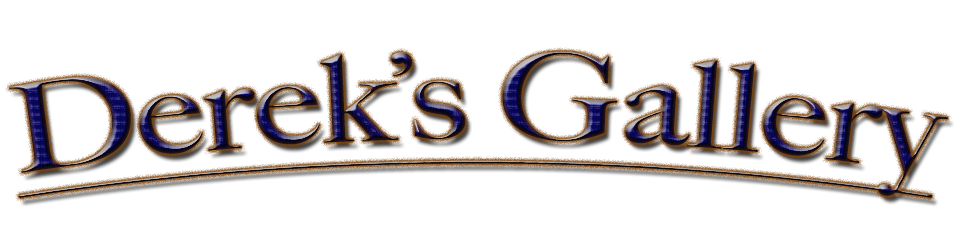
<style>
.page{position:relative;width:960px;height:244px;background:#ffffff}
.page>*{position:absolute;margin:0}
.t1{font:120px "BigCaslon-Medium";text-decoration:underline}
.t2{font:120px "BigCaslon-Medium"}
</style>
<div class="page">
<p class="t1" style="left:9px;top:51px;width:939px;height:147px"><span class="t2"><br></span>Derek’s Gallery</p>
</div>
